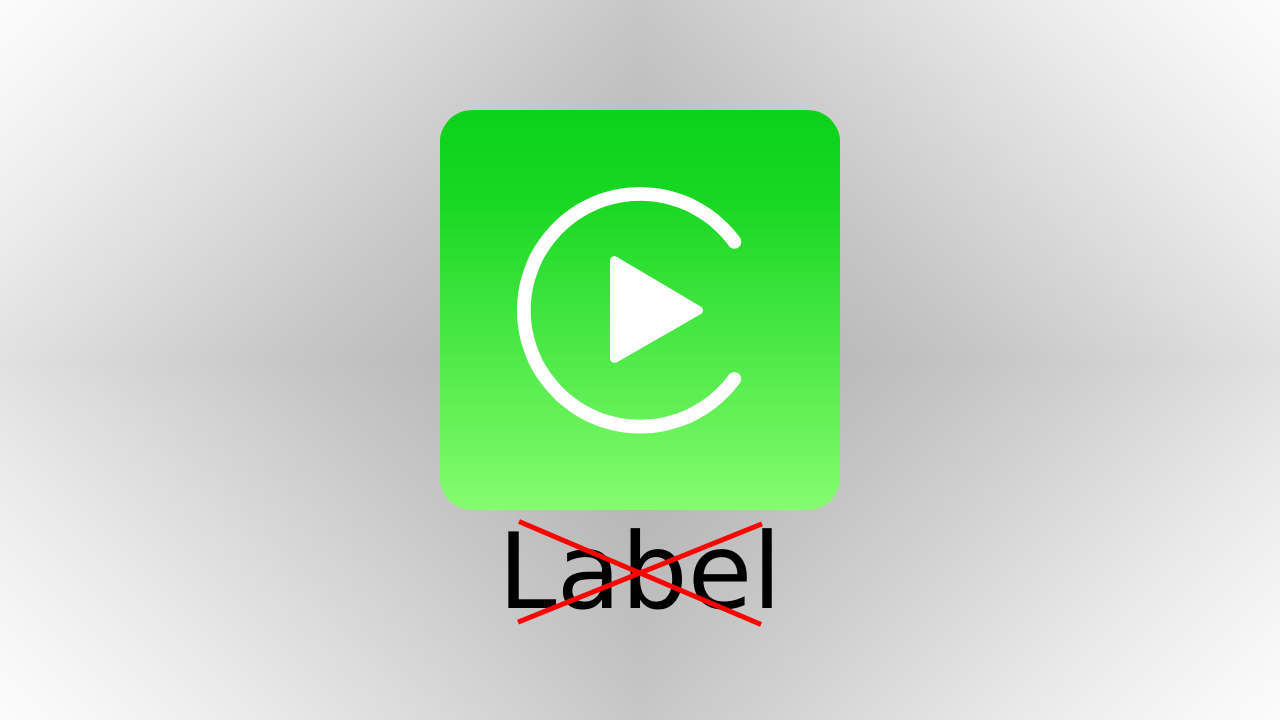
<style>
.page{position:relative;width:1280px;height:720px}
.page>*{position:absolute;margin:0}
.t1{font:105.1px "DejaVuSans";color:#000000}
</style>
<div class="page">
<p class="t1" style="left:508px;top:528px;width:264px;height:82px">Label</p>
</div>
